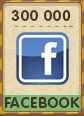
<style>
.page{position:relative;width:84px;height:116px;background:#eadab4}
.page>*{position:absolute;margin:0}
.t1{font:15px "RotondaC-Bold";letter-spacing:0.04em;color:#43341d;text-transform:uppercase}
</style>
<div class="page">
<p class="t1" style="left:11px;top:10px;width:60px;height:11px">300 000</p>
<p class="t1" style="left:5px;top:97px;width:75px;height:11px">Facebook</p>
</div>
